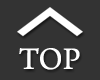
<style>
.page{position:relative;width:100px;height:80px;background:#333333}
.page>*{position:absolute;margin:0}
.t1{font:32.8px "ArnoPro-Regular";color:#ffffff}
</style>
<div class="page">
<p class="t1" style="left:19px;top:48px;width:61px;height:22px">TOP</p>
</div>
